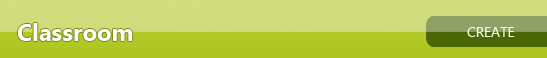
<style>
.page{position:relative;width:547px;height:58px}
.page>*{position:absolute;margin:0}
.t1{font:24px "SegoeUI-Bold";color:#fefefe}
.t2{font:14px "SegoeUI";color:#f6f7f1}
</style>
<div class="page">
<p class="t1" style="left:17px;top:23px;width:116px;height:18px">Classroom</p>
<p class="t2" style="left:467px;top:27px;width:48px;height:10px">CREATE</p>
</div>
